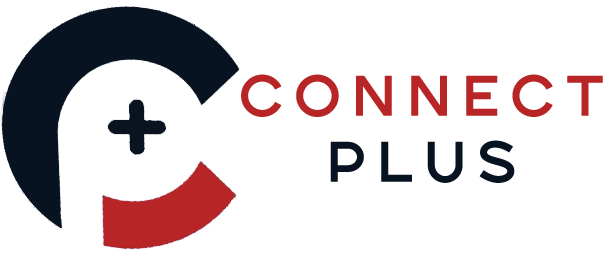
<style>
.page{position:relative;width:610px;height:256px;background:#ffffff}
.page>*{position:absolute;margin:0}
.t1{font:55px "SONGERSemiExpanded-Medium";letter-spacing:0.2em;color:#b72527;font-weight:bold}
.t2{font:55px "SONGERSemiExpanded-Medium";letter-spacing:0.2em;color:#071321;font-weight:bold}
</style>
<div class="page">
<p class="t1" style="left:241px;top:74px;width:362px;height:109px;text-align:center">connect<br><span class="t2">plus</span></p>
</div>
